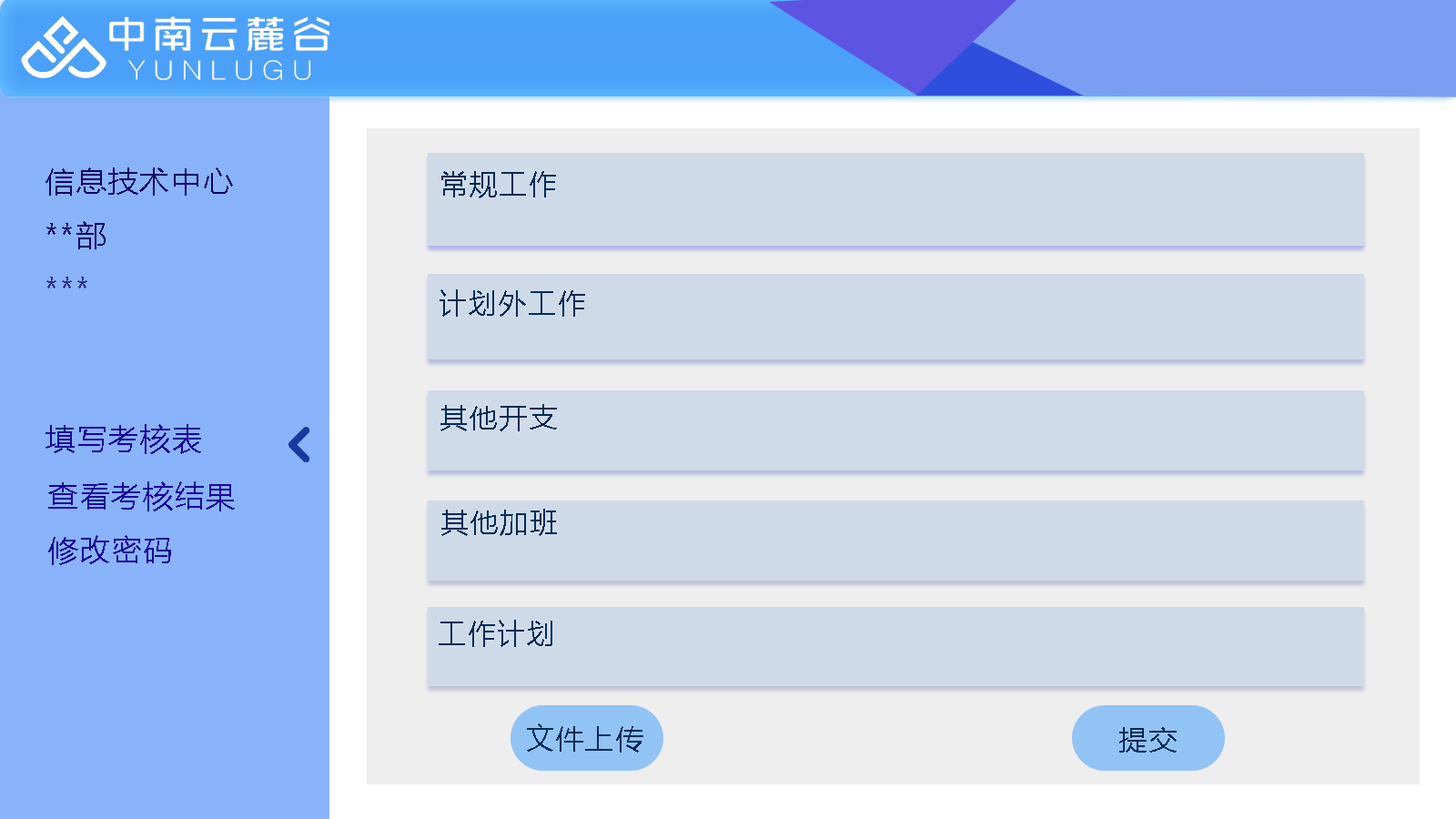
<style>
.page{position:relative;width:1456px;height:819px;background:#cfdae9}
.page>*{position:absolute;margin:0}
.t1{font:30.3px "MicrosoftYaHei";letter-spacing:0.05em;color:#130461}
.t2{font:28.4px "MicrosoftYaHeiUI";letter-spacing:0.05em;color:#032b55}
.t3{font:30.3px "MicrosoftYaHei";letter-spacing:0.05em;color:#303087}
.t4{font:30.3px "MicrosoftYaHei";letter-spacing:0.05em;color:#1c039a}
</style>
<div class="page">
<p class="t1" style="left:45px;top:167px;width:188px;height:29px">信息技术中心</p>
<p class="t2" style="left:441px;top:171px;width:115px;height:27px">常规工作</p>
<p class="t1" style="left:46px;top:221px;width:60px;height:28px">**部</p>
<p class="t3" style="left:46px;top:277px;width:41px;height:11px">***</p>
<p class="t2" style="left:440px;top:289px;width:145px;height:28px">计划外工作</p>
<p class="t2" style="left:440px;top:404px;width:117px;height:27px">其他开支</p>
<p class="t4" style="left:45px;top:424px;width:156px;height:30px">填写考核表</p>
<p class="t4" style="left:48px;top:481px;width:187px;height:30px">查看考核结果</p>
<p class="t2" style="left:441px;top:509px;width:116px;height:27px">其他加班</p>
<p class="t4" style="left:48px;top:535px;width:123px;height:30px">修改密码</p>
<p class="t2" style="left:439px;top:620px;width:113px;height:27px">工作计划</p>
<p class="t2" style="left:527px;top:723px;width:116px;height:30px">文件上传</p>
<p class="t2" style="left:1119px;top:727px;width:58px;height:26px">提交</p>
</div>
